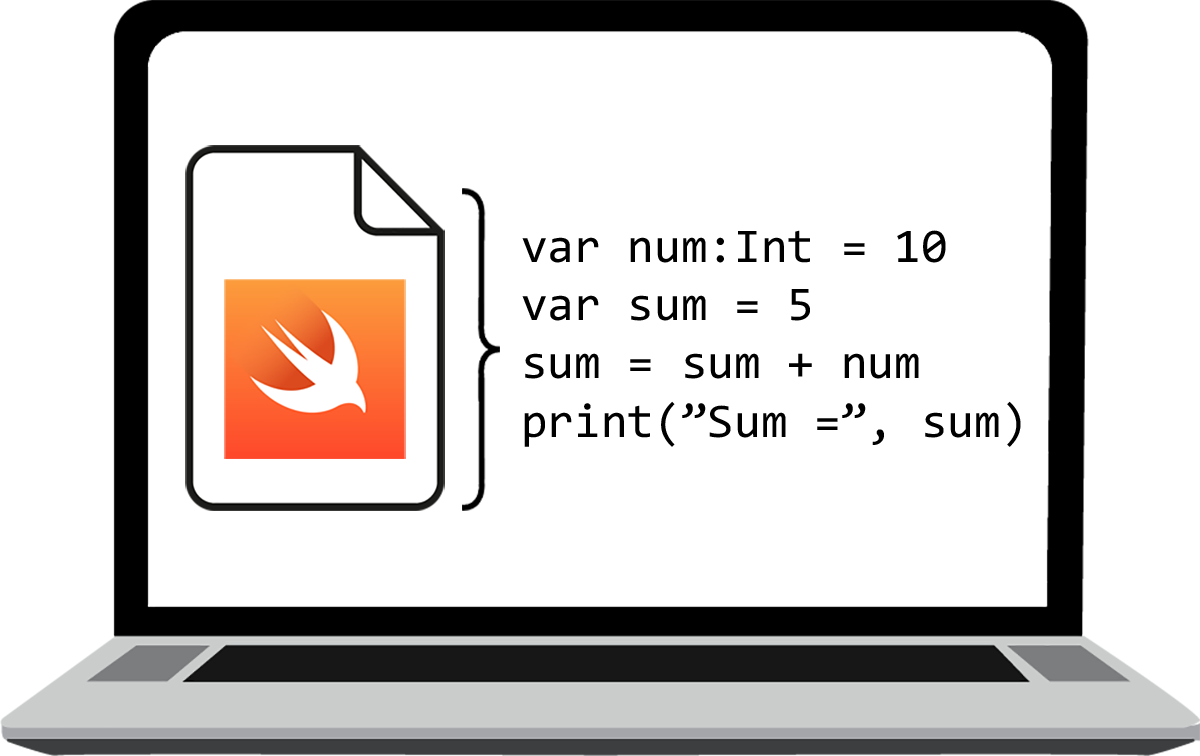
<style>
.page{position:relative;width:1200px;height:756px;background:#ffffff}
.page>*{position:absolute;margin:0}
.t1{font:48.5px "Consolas";color:#000000}
</style>
<div class="page">
<p class="t1" style="left:522px;top:230px;width:499px;height:217px">var num:Int = 10<br>var sum = 5<br>sum = sum + num<br>print(”Sum =”, sum)</p>
</div>
